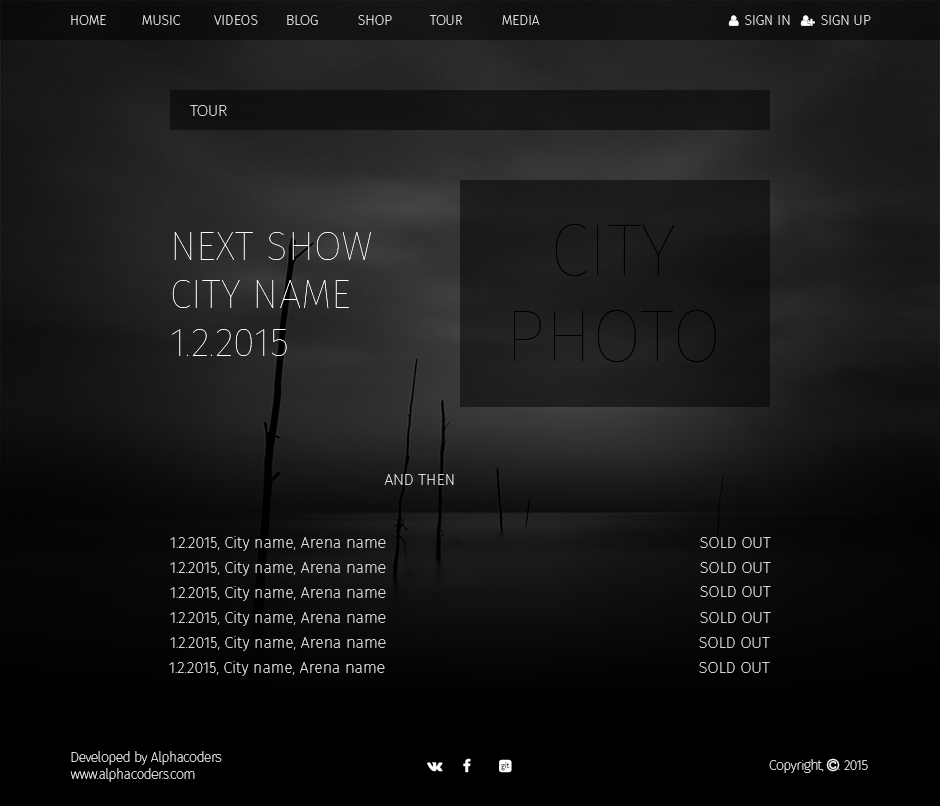
<style>
.page{position:relative;width:940px;height:806px}
.page>*{position:absolute;margin:0}
.t1{font:14px "FiraSans-Eight";color:#ffffff}
.t2{font:16px "FiraSans-Eight";color:#ffffff}
.t3{font:40px "FiraSans-Eight";color:#ffffff}
.t4{font:72px "FiraSans-Eight";color:#000000}
.t5{font:16px "FiraSans-Eight"}
.t6{font:14px "FiraSans-Eight";letter-spacing:-0.035em;color:#ffffff}
</style>
<div class="page">
<p class="t1" style="left:71px;top:15px;width:469px;height:10px">HOME MUSIC VIDEOS BLOG  SHOP  TOUR  MEDIA</p>
<p class="t2" style="left:190px;top:105px;width:37px;height:11px">TOUR</p>
<p class="t3" style="left:172px;top:232px;width:199px;height:124px">NEXT SHOW<br>CITY NAME<br>1.2.2015</p>
<p class="t4" style="left:514px;top:223px;width:202px;height:140px;text-align:center">CITY<br>PHOTO</p>
<p class="t2" style="left:384px;top:474px;width:70px;height:11px">AND THEN</p>
<p class="t2" style="left:170px;top:536px;width:216px;height:15px">1.2.2015, City name, Arena name</p>
<p class="t5" style="left:700px;top:537px;width:71px;height:11px">SOLD OUT</p>
<p class="t2" style="left:170px;top:561px;width:216px;height:15px">1.2.2015, City name, Arena name</p>
<p class="t5" style="left:700px;top:562px;width:71px;height:11px">SOLD OUT</p>
<p class="t2" style="left:170px;top:586px;width:216px;height:15px">1.2.2015, City name, Arena name</p>
<p class="t5" style="left:700px;top:586px;width:71px;height:11px">SOLD OUT</p>
<p class="t2" style="left:170px;top:611px;width:216px;height:15px">1.2.2015, City name, Arena name</p>
<p class="t5" style="left:700px;top:612px;width:71px;height:11px">SOLD OUT</p>
<p class="t2" style="left:170px;top:636px;width:216px;height:15px">1.2.2015, City name, Arena name</p>
<p class="t5" style="left:699px;top:637px;width:71px;height:11px">SOLD OUT</p>
<p class="t2" style="left:169px;top:661px;width:216px;height:15px">1.2.2015, City name, Arena name</p>
<p class="t5" style="left:699px;top:662px;width:71px;height:11px">SOLD OUT</p>
<p class="t6" style="left:70px;top:751px;width:152px;height:31px">Developed by Alphacoders<br>www.alphacoder.s.com</p>
</div>
